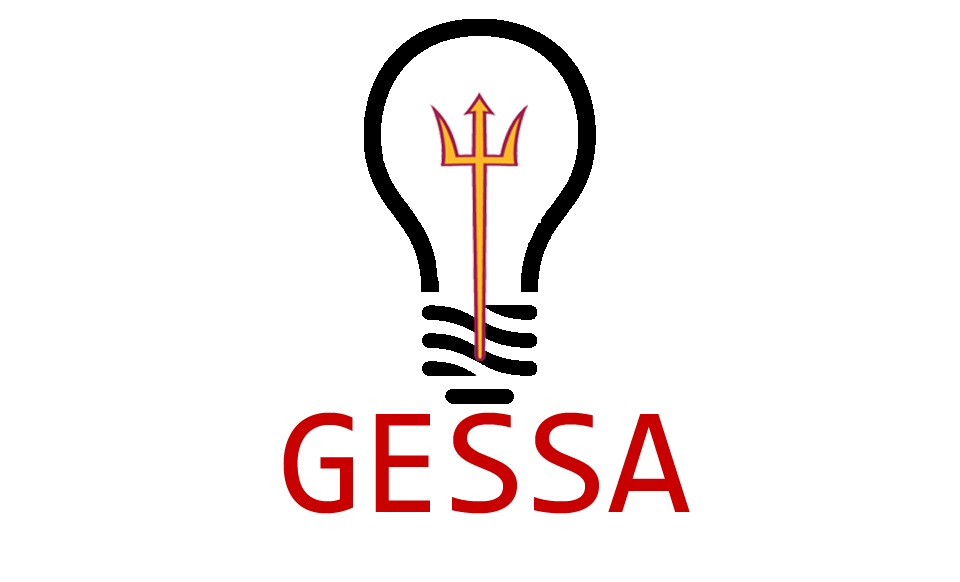
<style>
.page{position:relative;width:960px;height:582px;background:#ffffff}
.page>*{position:absolute;margin:0}
.t1{font:153.5px "Consolas";color:#c90000}
</style>
<div class="page">
<p class="t1" style="left:283px;top:412px;width:407px;height:102px">GESSA</p>
</div>
